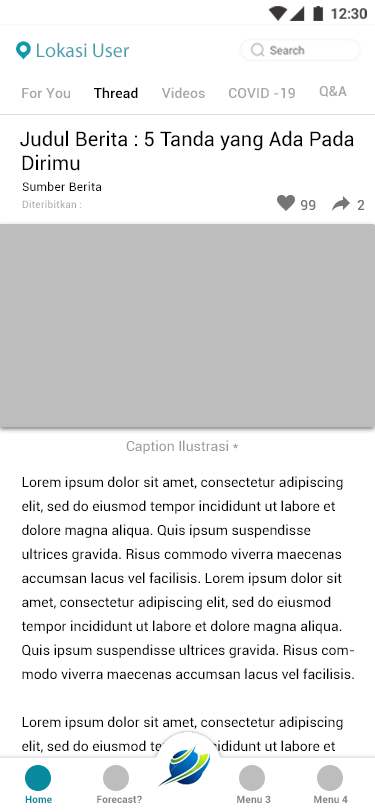
<style>
.page{position:relative;width:375px;height:812px;background:#ffffff}
.page>*{position:absolute;margin:0}
.t1{font:20px "MyriadPro-Regular";color:#4aa1ae}
.t2{font:14px "Roboto-Medium";letter-spacing:0.01em;color:#a7a7a7}
.t3{font:14px "Roboto-Medium";letter-spacing:0.01em;color:#000000}
.t4{font:20px/24px "Roboto-Regular";letter-spacing:0.005em;color:#000000}
.t5{font:12px "Roboto-Regular";letter-spacing:0.02em;color:#000000}
.t6{font:10px "Roboto-Regular";letter-spacing:0.02em;color:#a7a7a7}
.t7{font:14px "Roboto-Medium";letter-spacing:0.005em;color:#757575;text-transform:uppercase}
.t8{font:14px "Roboto-Regular";color:#9a9a9a}
.t9{font:14px/24px "Roboto-Regular";color:#000000}
.t10{font:10px "Roboto-Bold";letter-spacing:0.005em;color:#088a9d}
.t11{font:10px "Roboto-Bold";letter-spacing:0.005em;color:#828282}
</style>
<div class="page">
<p class="t1" style="left:37px;top:42px;width:92px;height:16px">Lokasi User</p>
<p class="t2" style="left:22px;top:88px;width:48px;height:11px">For You</p>
<p class="t3" style="left:94px;top:87px;width:44px;height:12px">Thread</p>
<p class="t2" style="left:162px;top:87px;width:43px;height:11px">Videos</p>
<p class="t2" style="left:229px;top:88px;width:66px;height:10px">COVID -19</p>
<p class="t2" style="left:319px;top:86px;width:28px;height:11px">Q&amp;A</p>
<p class="t4" style="left:20px;top:130px;width:334px;height:41px">Judul Berita : 5 Tanda yang Ada Pada Dirimu</p>
<p class="t5" style="left:22px;top:181px;width:80px;height:10px">Sumber Berita</p>
<p class="t6" style="left:22px;top:200px;width:60px;height:8px">Diteribitkan :</p>
<p class="t7" style="left:300px;top:200px;width:16px;height:10px">99</p>
<p class="t7" style="left:357px;top:200px;width:8px;height:10px">2</p>
<p class="t8" style="left:126px;top:440px;width:112px;height:14px">Caption Ilustrasi *</p>
<p class="t9" style="left:21px;top:476px;width:333px;height:278px">Lorem ipsum dolor sit amet, consectetur adipiscing elit, sed do eiusmod tempor incididunt ut labore et dolore magna aliqua. Quis ipsum suspendisse ultrices gravida. Risus commodo viverra maecenas accumsan lacus vel facilisis. Lorem ipsum dolor sit amet, consectetur adipiscing elit, sed do eiusmod tempor incididunt ut labore et dolore magna aliqua. Quis ipsum suspendisse ultrices gravida. Risus commodo viverra maecenas accumsan lacus vel facilisis. <br><br>Lorem ipsum dolor sit amet, consectetur adipiscing elit, sed do eiusmod tempor incididunt ut labore et dolore magna aliqua. Quis ipsum suspendisse ultrices gravida. Risus commodo viverra maecenas accumsan lacus vel facilisis.</p>
<p class="t10" style="left:25px;top:795px;width:27px;height:8px">Home</p>
<p class="t11" style="left:97px;top:795px;width:45px;height:8px">Forecast?</p>
<p class="t11" style="left:237px;top:795px;width:34px;height:8px">Menu 3</p>
<p class="t11" style="left:314px;top:795px;width:34px;height:8px">Menu 4</p>
</div>
